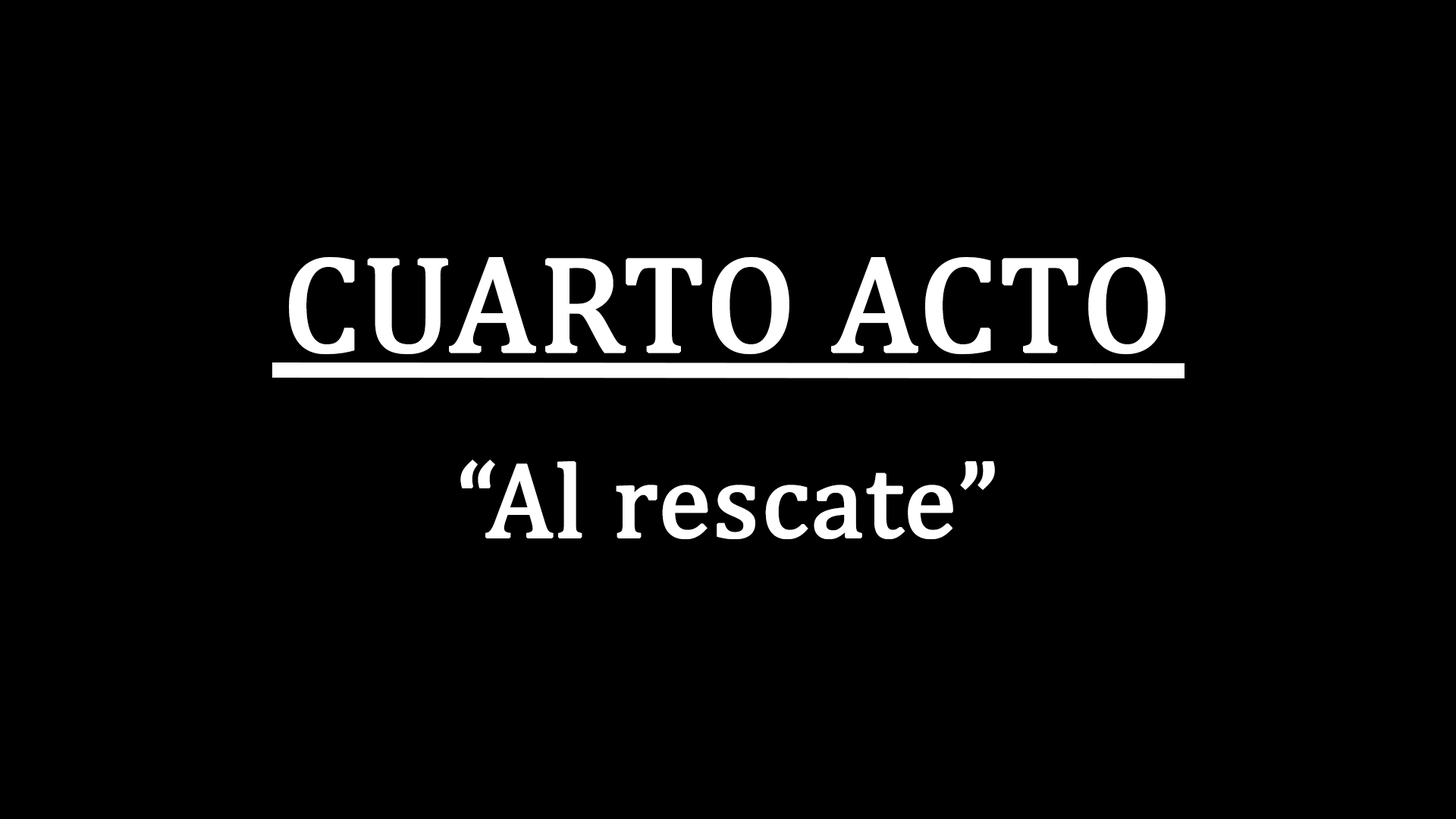
<style>
.page{position:relative;width:1456px;height:819px;background:#000000}
.page>*{position:absolute;margin:0}
.t1{font:136.5px "Cambria";color:#ffffff;font-weight:bold}
.t2{font:106.2px "Cambria";color:#ffffff;font-weight:bold}
</style>
<div class="page">
<p class="t1" style="left:289px;top:257px;width:877px;height:97px">CUARTO ACTO</p>
<p class="t2" style="left:460px;top:460px;width:535px;height:79px">“Al rescate”</p>
</div>
